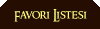
<style>
.page{position:relative;width:100px;height:29px;background:#250d01}
.page>*{position:absolute;margin:0}
.t1{font:12px "RingbearerMedium";letter-spacing:0.005em;color:#f6fd81}
</style>
<div class="page">
<p class="t1" style="left:14px;top:9px;width:73px;height:13px">Favori Listesi</p>
</div>
